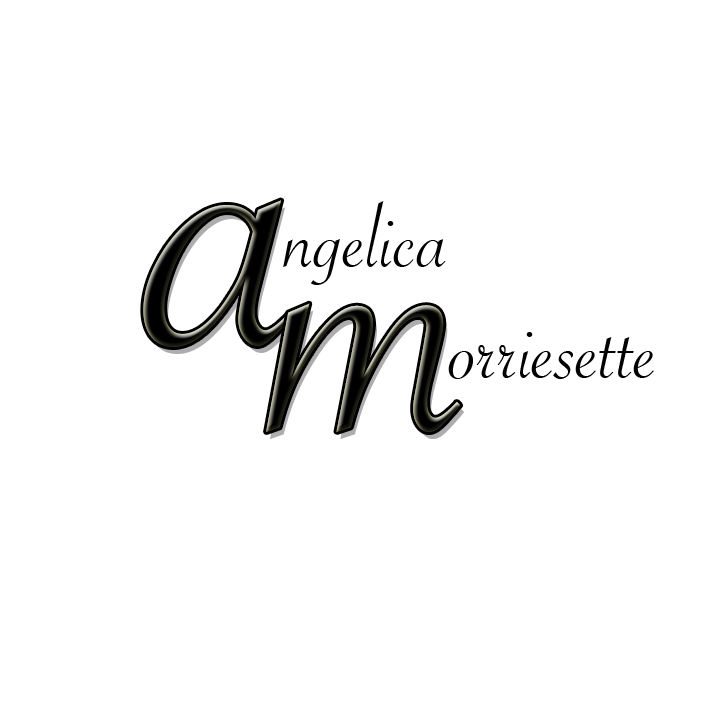
<style>
.page{position:relative;width:717px;height:717px;background:#ffffff}
.page>*{position:absolute;margin:0}
.t1{font:500px "SavoyeLetPlain"}
.t2{font:96px "SavoyeLetPlain";color:#000000}
.t3{font:440px "SavoyeLetPlain"}
</style>
<div class="page">
<p class="t1" style="left:143px;top:200px;width:150px;height:147px">a</p>
<p class="t2" style="left:283px;top:201px;width:163px;height:84px">ngelica</p>
<p class="t3" style="left:266px;top:303px;width:195px;height:129px">m</p>
<p class="t2" style="left:448px;top:332px;width:206px;height:47px">orriesette</p>
</div>
